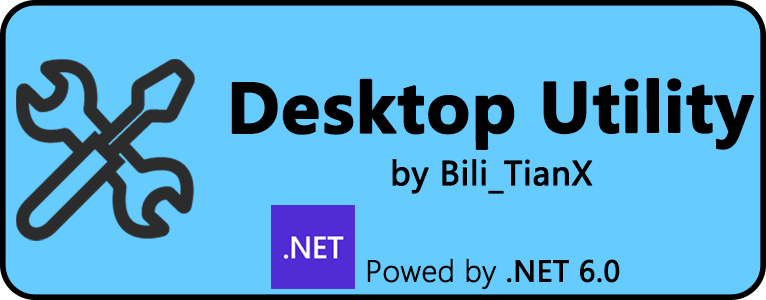
<style>
.page{position:relative;width:766px;height:300px;background:#66ccff}
.page>*{position:absolute;margin:0}
.t1{font:66.2px "MicrosoftYaHei-Bold";color:#000000;font-weight:bold}
.t2{font:32px "MicrosoftYaHei";color:#000000;font-weight:bold}
.t3{font:28px "MicrosoftYaHeiLight";color:#000000;font-weight:bold}
.t4{font:28px "MicrosoftYaHei";color:#000000;font-weight:bold}
</style>
<div class="page">
<p class="t1" style="left:231px;top:78px;width:524px;height:72px">Desktop Utility</p>
<p class="t2" style="left:392px;top:159px;width:201px;height:35px">by Bili_TianX</p>
<p class="t3" style="left:367px;top:258px;width:253px;height:32px">Powed by <span class="t4">.NET 6.0</span></p>
</div>
